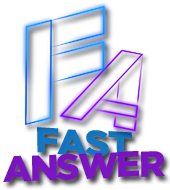
<style>
.page{position:relative;width:170px;height:190px;background:#ffffff}
.page>*{position:absolute;margin:0}
.t1{font:35.6px "GothamBlack";letter-spacing:-0.06em;color:#1578c4;scale:1.07 1}
.t2{font:36.1px "GothamBlack";letter-spacing:-0.06em;color:#7c15c4}
</style>
<div class="page">
<p class="t1" style="left:37px;top:127px;width:95px;height:30px;rotate:3deg">FAST</p>
<p class="t2" style="left:3px;top:151px;width:162px;height:31px;rotate:-2deg">ANSWER</p>
</div>
